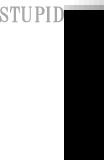
<style>
.page{position:relative;width:104px;height:160px;background:#ffffff}
.page>*{position:absolute;margin:0}
.t1{font:21px "HGMinchoB";color:#a8a8a8;text-transform:uppercase;scale:1.1 1}
.t2{font:21px "HGMinchoB";letter-spacing:-0.025em;color:#a8a8a8;text-transform:uppercase;scale:1.1 1}
</style>
<div class="page">
<p class="t1" style="left:0px;top:6px;width:64px;height:17px">stu <span class="t2">pid</span></p>
</div>
